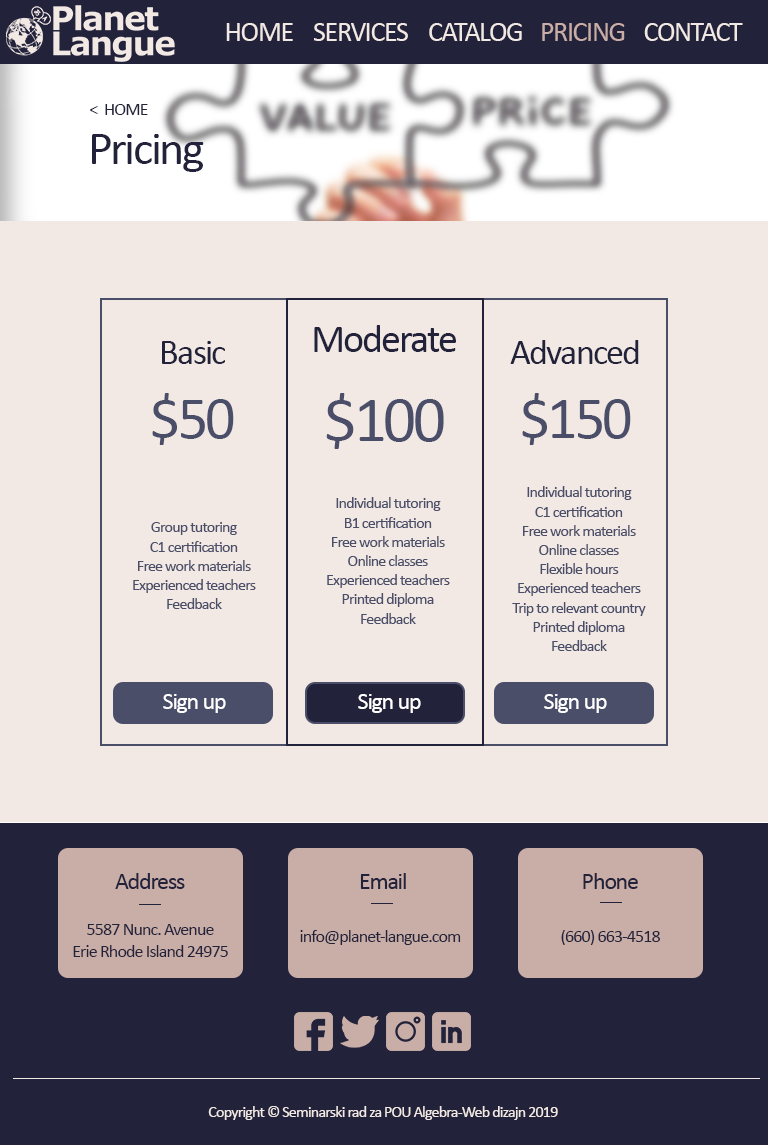
<style>
.page{position:relative;width:768px;height:1145px;background:#f2e9e4}
.page>*{position:absolute;margin:0}
.t1{font:28px "Calibri";letter-spacing:-0.05em;color:#f2e9e4}
.t2{font:28px "Calibri";letter-spacing:-0.05em;color:#c9ada7}
.t3{font:18px "Calibri";letter-spacing:-0.05em;color:#22223b}
.t4{font:48px "Calibri";letter-spacing:-0.05em;color:#22223b}
.t5{font:40px "Calibri";letter-spacing:-0.05em;color:#22223b}
.t6{font:36px "Calibri";letter-spacing:-0.05em;color:#22223b}
.t7{font:60px "Calibri";letter-spacing:-0.05em;color:#4a4e69}
.t8{font:65px "Calibri";letter-spacing:-0.05em;color:#4a4e69}
.t9{font:16px "Calibri";letter-spacing:-0.05em;color:#4a4e69}
.t10{font:24px "Calibri";letter-spacing:-0.05em;color:#ffffff}
.t11{font:24px "Calibri";letter-spacing:-0.05em;color:#22223b}
.t12{font:16px "Calibri";letter-spacing:-0.05em;color:#f2e9e4}
</style>
<div class="page">
<p class="t1" style="left:226px;top:23px;width:67px;height:18px">HOME</p>
<p class="t1" style="left:314px;top:23px;width:94px;height:18px">SERVICES</p>
<p class="t1" style="left:429px;top:23px;width:93px;height:18px">CATALOG</p>
<p class="t2" style="left:542px;top:23px;width:83px;height:18px">PRICING</p>
<p class="t1" style="left:644px;top:23px;width:99px;height:18px">CONTACT</p>
<p class="t3" style="left:90px;top:104px;width:58px;height:11px">&lt;  HOME</p>
<p class="t4" style="left:92px;top:134px;width:112px;height:38px">Pricing</p>
<p class="t5" style="left:314px;top:325px;width:142px;height:27px">Moderate</p>
<p class="t6" style="left:162px;top:341px;width:63px;height:23px">Basic</p>
<p class="t6" style="left:510px;top:340px;width:129px;height:24px">Advanced</p>
<p class="t7" style="left:152px;top:393px;width:82px;height:52px">$50</p>
<p class="t8" style="left:326px;top:393px;width:118px;height:56px">$100</p>
<p class="t7" style="left:522px;top:393px;width:109px;height:52px">$150</p>
<p class="t9" style="left:512px;top:486px;width:134px;height:165px;text-align:center">Individual tutoring<br>C1 certification<br>Free work materials<br>Online classes<br>Flexible hours<br>Experienced teachers<br>Trip to relevant country<br>Printed diploma<br>Feedback</p>
<p class="t9" style="left:327px;top:497px;width:123px;height:127px;text-align:center">Individual tutoring<br>B1 certification<br>Free work materials<br>Online classes<br>Experienced teachers<br>Printed diploma<br>Feedback</p>
<p class="t9" style="left:133px;top:522px;width:123px;height:87px;text-align:center">Group tutoring<br>C1 certification<br>Free work materials<br>Experienced teachers<br>Feedback</p>
<p class="t10" style="left:163px;top:694px;width:63px;height:19px">Sign up</p>
<p class="t10" style="left:358px;top:694px;width:63px;height:19px">Sign up</p>
<p class="t10" style="left:544px;top:694px;width:63px;height:19px">Sign up</p>
<p class="t11" style="left:115px;top:873px;width:70px;height:16px">Address</p>
<p class="t11" style="left:360px;top:873px;width:46px;height:16px">Email</p>
<p class="t11" style="left:583px;top:873px;width:55px;height:16px">Phone</p>
<p class="t3" style="left:73px;top:924px;width:155px;height:33px;text-align:center">5587 Nunc. Avenue<br>Erie Rhode Island 24975</p>
<p class="t3" style="left:300px;top:930px;width:161px;height:15px">info@planet-langue.com</p>
<p class="t3" style="left:561px;top:930px;width:99px;height:15px">(660) 663-4518</p>
<p class="t12" style="left:208px;top:1106px;width:350px;height:14px">Copyright © Seminarski rad za POU Algebra-Web dizajn 2019</p>
</div>
